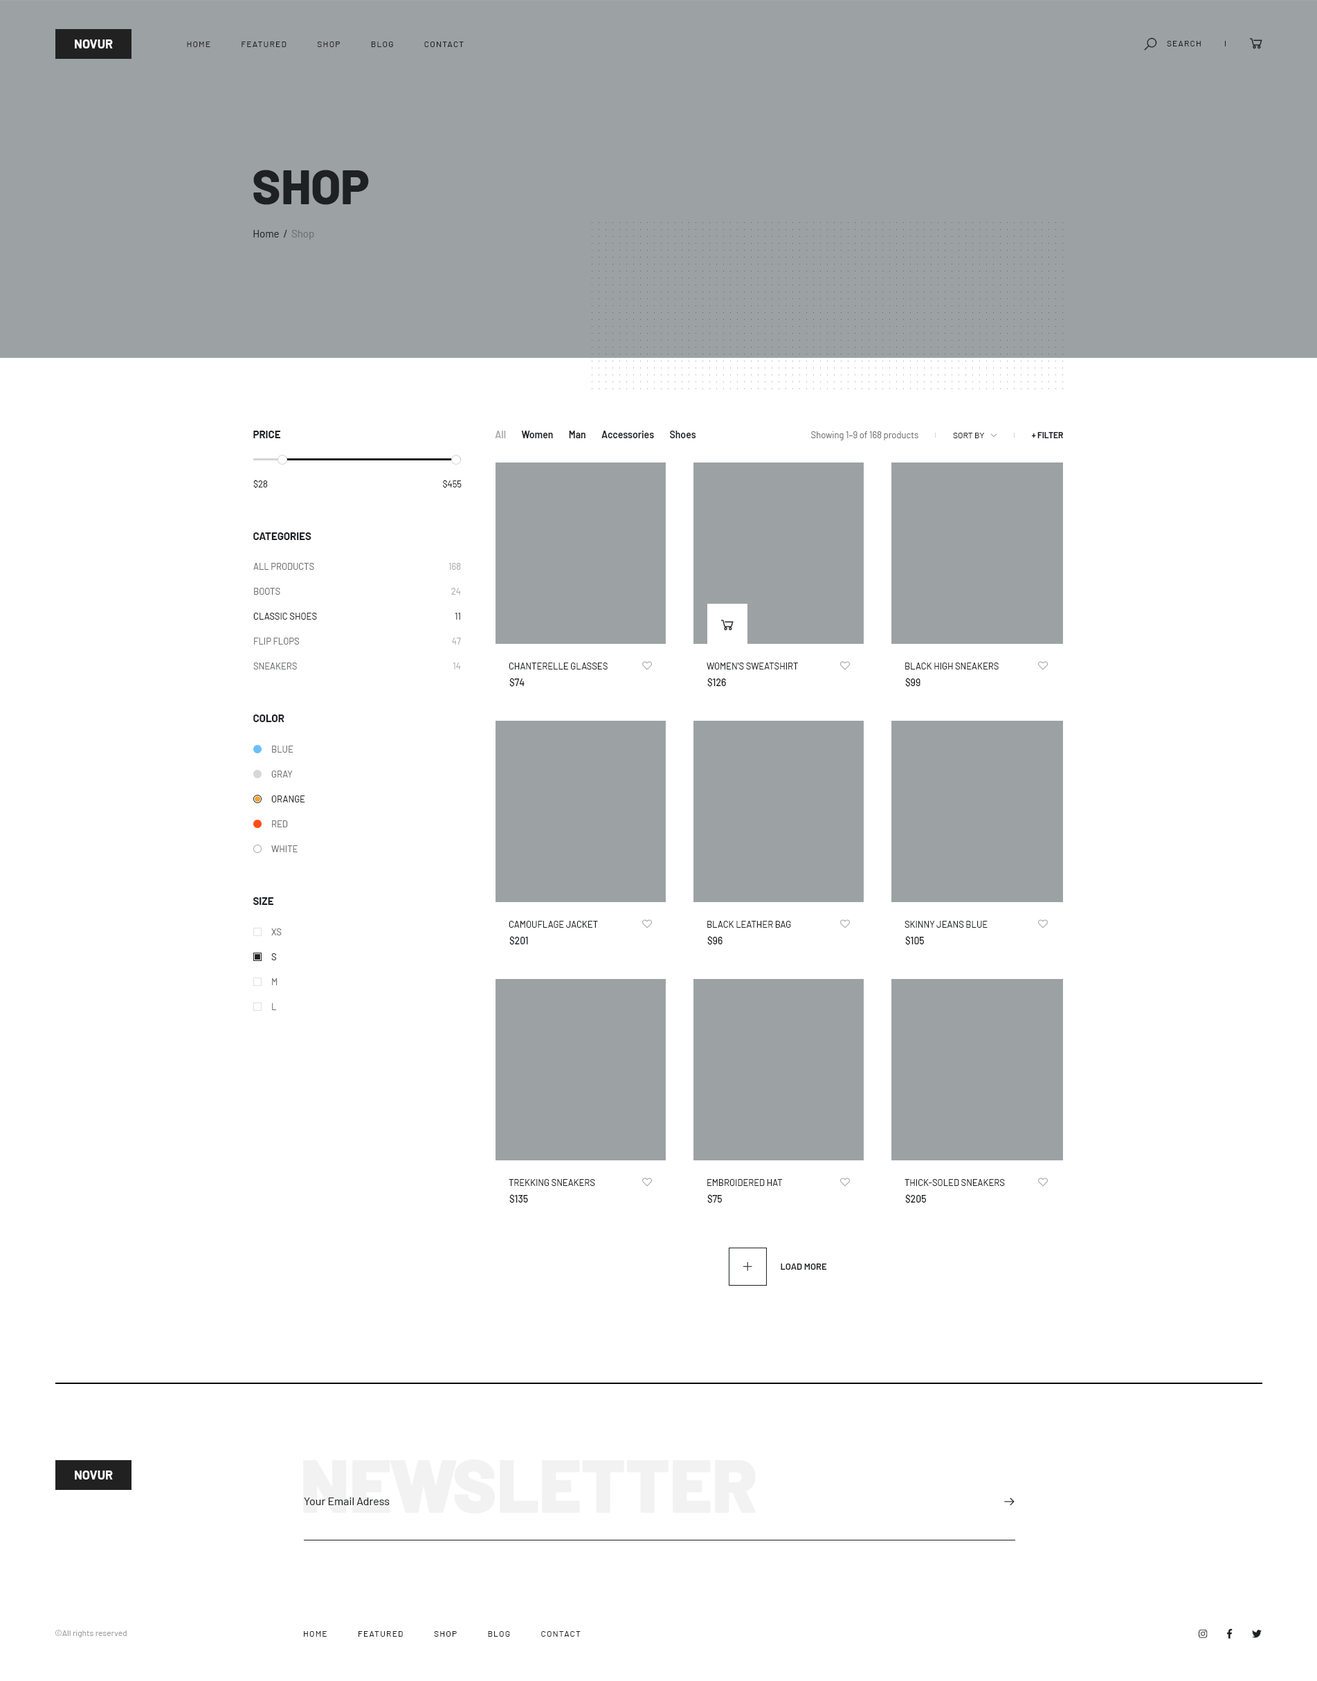
<style>
.page{position:relative;width:1317px;height:1681px;background:#ffffff}
.page>*{position:absolute;margin:0}
.t1{font:12.5px "Barlow-Bold";color:#fefefe;text-transform:uppercase}
.t2{font:8.3px "Barlow-Regular";letter-spacing:0.1em;color:#1e2124;text-transform:uppercase}
.t3{font:48.5px "Barlow-ExtraBold";color:#1e2124;text-transform:uppercase}
.t4{font:10.4px "Barlow-Regular";color:#1e2124}
.t5{font:10.4px "Barlow-Regular";color:#6e7071}
.t6{font:10.4px "Barlow-Bold";color:#1e2124;text-transform:uppercase}
.t7{font:9.7px "Barlow-SemiBold";color:#1e2124}
.t8{font:9.7px "Barlow-SemiBold";color:#aaabab}
.t9{font:9px "Barlow-Regular";color:#6e7071}
.t10{font:8.3px "Barlow-Regular";color:#1e2124;text-transform:uppercase}
.t11{font:8.3px "Barlow-Bold";color:#1e2124;text-transform:uppercase}
.t12{font:9px "Barlow-Regular";color:#1e2124}
.t13{font:9px/24.9px "Barlow-Regular";color:#6e7071;text-transform:uppercase}
.t14{font:9px/24.9px "Barlow-Regular";color:#1e2124;text-transform:uppercase}
.t15{font:9px/24.9px "Barlow-Regular";color:#aaabab}
.t16{font:9px/24.9px "Barlow-Regular";color:#1e2124}
.t17{font:9px "Barlow-Regular";color:#1e2124;text-transform:uppercase}
.t18{font:9.7px "Barlow-Medium";color:#1e2124}
.t19{font:9px "Barlow-SemiBold";color:#1e2124;text-transform:uppercase}
.t20{font:74.1px "Barlow-Black";color:#f2f2f2}
.t21{font:11.1px "Barlow-Regular";color:#1e2124}
.t22{font:8.3px "Barlow-Regular";color:#9e9d9d}
</style>
<div class="page">
<p class="t1" style="left:75px;top:39px;width:38px;height:9px">novur</p>
<p class="t2" style="left:187px;top:42px;width:277px;height:5px">Home            Featured            Shop            Blog            Contact</p>
<p class="t2" style="left:1167px;top:41px;width:34px;height:5px">Search</p>
<p class="t3" style="left:253px;top:170px;width:116px;height:35px">Shop</p>
<p class="t4" style="left:253px;top:230px;width:61px;height:10px">Home  /<span class="t5">  Shop</span></p>
<p class="t6" style="left:253px;top:431px;width:28px;height:7px">Price</p>
<p class="t7" style="left:495px;top:431px;width:201px;height:7px"><span class="t8">All</span>        Women        Man        Accessories        Shoes</p>
<p class="t9" style="left:811px;top:431px;width:108px;height:9px">Showing 1–9 of 168 products</p>
<p class="t10" style="left:953px;top:433px;width:31px;height:5px">Sort by</p>
<p class="t11" style="left:1032px;top:432px;width:31px;height:6px">+ Filter</p>
<p class="t12" style="left:253px;top:480px;width:15px;height:8px">$28</p>
<p class="t12" style="left:443px;top:480px;width:19px;height:8px">$455</p>
<p class="t6" style="left:253px;top:532px;width:59px;height:8px">Categories</p>
<p class="t13" style="left:253px;top:563px;width:64px;height:106px">All Products<br>Boots<br><span class="t14">Classic Shoes<br></span>Flip flops<br>Sneakers</p>
<p class="t15" style="left:449px;top:563px;width:12px;height:106px;text-align:right">168<br>24<br><span class="t16">11<br></span>47<br>14</p>
<p class="t17" style="left:509px;top:663px;width:99px;height:6px">Chanterelle Glasses</p>
<p class="t17" style="left:707px;top:663px;width:91px;height:6px">Women's Sweatshirt</p>
<p class="t17" style="left:906px;top:663px;width:93px;height:6px">Black High Sneakers</p>
<p class="t18" style="left:510px;top:678px;width:15px;height:9px">$74</p>
<p class="t18" style="left:708px;top:678px;width:18px;height:9px">$126</p>
<p class="t18" style="left:906px;top:678px;width:15px;height:9px">$99</p>
<p class="t6" style="left:253px;top:714px;width:32px;height:8px">Color</p>
<p class="t13" style="left:271px;top:746px;width:34px;height:106px">Blue<br>Gray<br><span class="t14">Orange<br></span>Red<br>White</p>
<p class="t6" style="left:253px;top:897px;width:21px;height:8px">Size</p>
<p class="t13" style="left:271px;top:928px;width:11px;height:82px">XS<br><span class="t14">S<br></span>M<br>L</p>
<p class="t17" style="left:509px;top:921px;width:89px;height:7px">Camouflage Jacket</p>
<p class="t17" style="left:708px;top:921px;width:83px;height:7px">Black Leather Bag</p>
<p class="t17" style="left:905px;top:921px;width:83px;height:7px">Skinny Jeans Blue</p>
<p class="t18" style="left:510px;top:936px;width:18px;height:9px">$201</p>
<p class="t18" style="left:708px;top:936px;width:15px;height:9px">$96</p>
<p class="t18" style="left:906px;top:936px;width:19px;height:9px">$105</p>
<p class="t17" style="left:509px;top:1179px;width:86px;height:7px">Trekking Sneakers</p>
<p class="t17" style="left:708px;top:1179px;width:75px;height:7px">Embroidered Hat</p>
<p class="t17" style="left:905px;top:1179px;width:100px;height:7px">Thick-Soled Sneakers</p>
<p class="t18" style="left:510px;top:1194px;width:18px;height:9px">$135</p>
<p class="t18" style="left:708px;top:1194px;width:15px;height:9px">$75</p>
<p class="t18" style="left:906px;top:1194px;width:21px;height:9px">$205</p>
<p class="t19" style="left:781px;top:1263px;width:46px;height:7px">Load More</p>
<p class="t20" style="left:303px;top:1459px;width:453px;height:54px">NEWSLETTER</p>
<p class="t1" style="left:75px;top:1470px;width:38px;height:9px">Novur</p>
<p class="t21" style="left:304px;top:1497px;width:86px;height:8px">Your Email Adress</p>
<p class="t22" style="left:55px;top:1630px;width:72px;height:7px">©All rights reserved</p>
<p class="t2" style="left:304px;top:1631px;width:277px;height:6px">Home            Featured            Shop            Blog            Contact</p>
</div>
